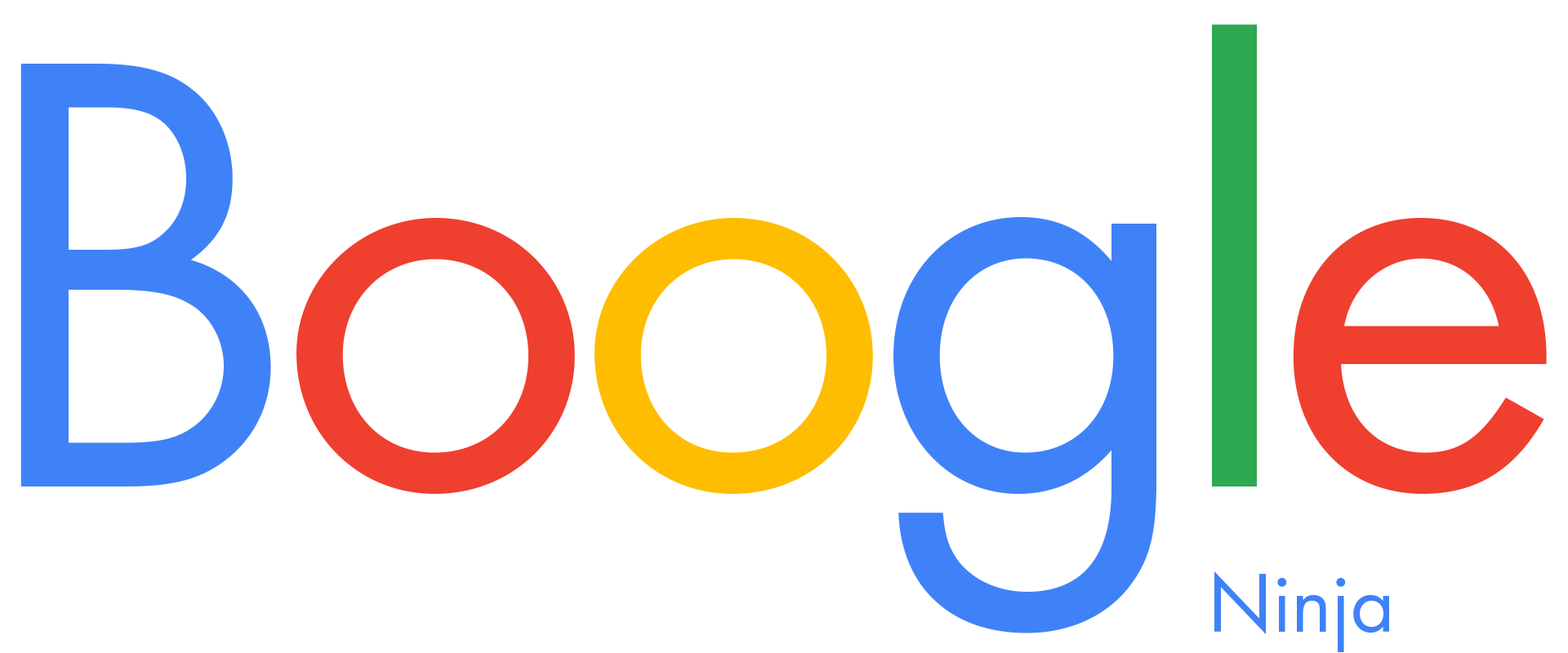
<style>
.page{position:relative;width:1568px;height:653px;background:#ffffff}
.page>*{position:absolute;margin:0}
.t1{font:633.9px "FuturaTOT-Book";letter-spacing:-0.05em;color:#3f82f8}
.t2{font:633.9px "FuturaTOT-Book";letter-spacing:-0.05em;color:#ef3f2f}
.t3{font:633.9px "FuturaTOT-Book";letter-spacing:-0.05em;color:#febd00}
.t4{font:633.9px "FuturaTOT-Book";letter-spacing:-0.05em;color:#2da951}
.t5{font:86.7px "FuturaTOT-Book";color:#3f82f8}
</style>
<div class="page">
<p class="t1" style="left:20px;top:24px;width:1527px;height:610px">B<span class="t2">o</span><span class="t3">o</span>g<span class="t4">l</span><span class="t2">e</span></p>
<p class="t5" style="left:1214px;top:572px;width:175px;height:81px">Ninja</p>
</div>
